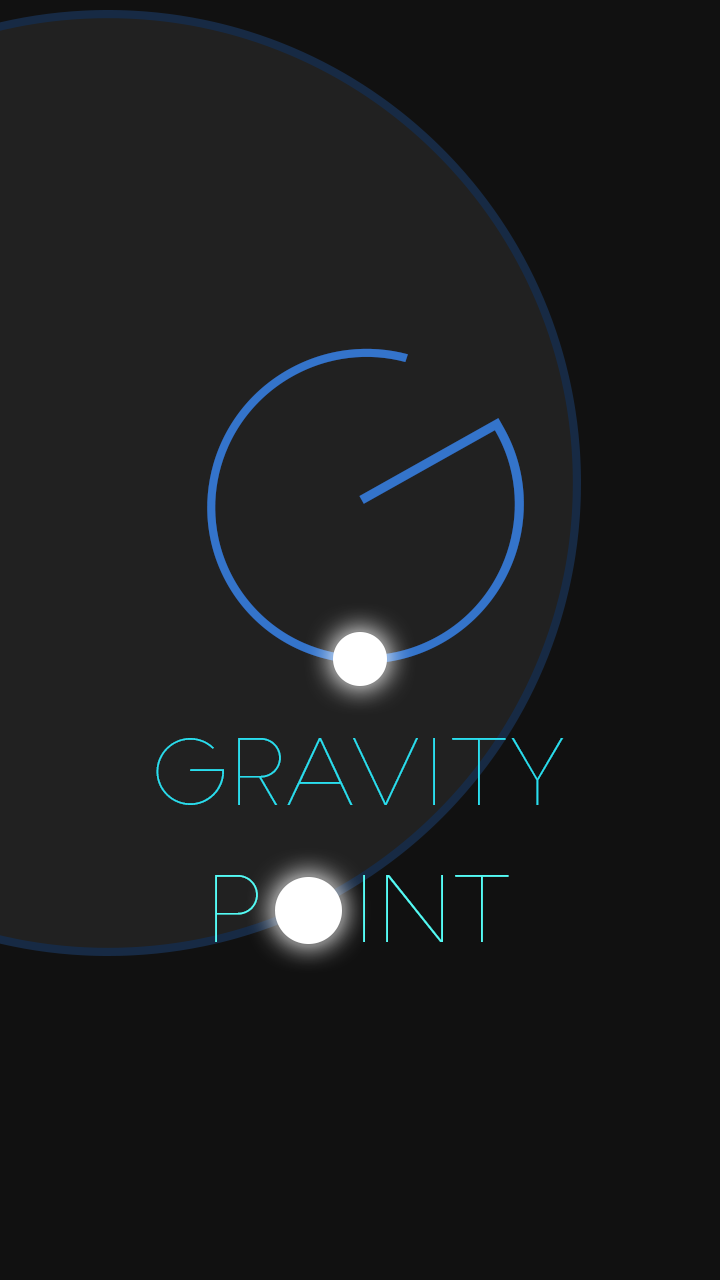
<style>
.page{position:relative;width:720px;height:1280px;background:#111111}
.page>*{position:absolute;margin:0}
.t1{font:418.4px "SlimJoe";color:#3474cb}
.t2{font:89.1px "SlimJoe";color:#2adeee}
.t3{font:89.1px "SlimJoe";color:#55fbf5}
</style>
<div class="page">
<p class="t1" style="left:207px;top:348px;width:317px;height:316px;rotate:-29deg">G</p>
<p class="t2" style="left:156px;top:738px;width:408px;height:67px">gravity</p>
<p class="t3" style="left:215px;top:875px;width:294px;height:67px">p  int</p>
</div>
